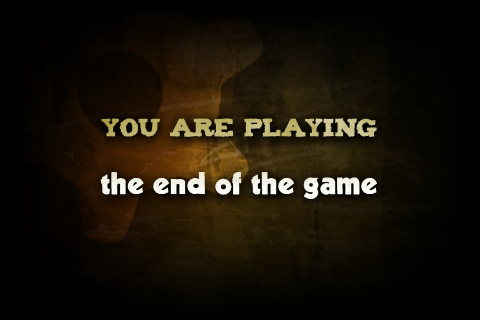
<style>
.page{position:relative;width:480px;height:320px}
.page>*{position:absolute;margin:0}
.t1{font:27px/58px "Decade";color:#ffffff}
.t2{font:20px/64px "Tiza";color:#cddfa7}
</style>
<div class="page">
<p class="t1" style="left:100px;top:118px;width:278px;height:81px;text-align:center"><span class="t2">YOU ARE PLAYING<br></span>the end of the game</p>
</div>
